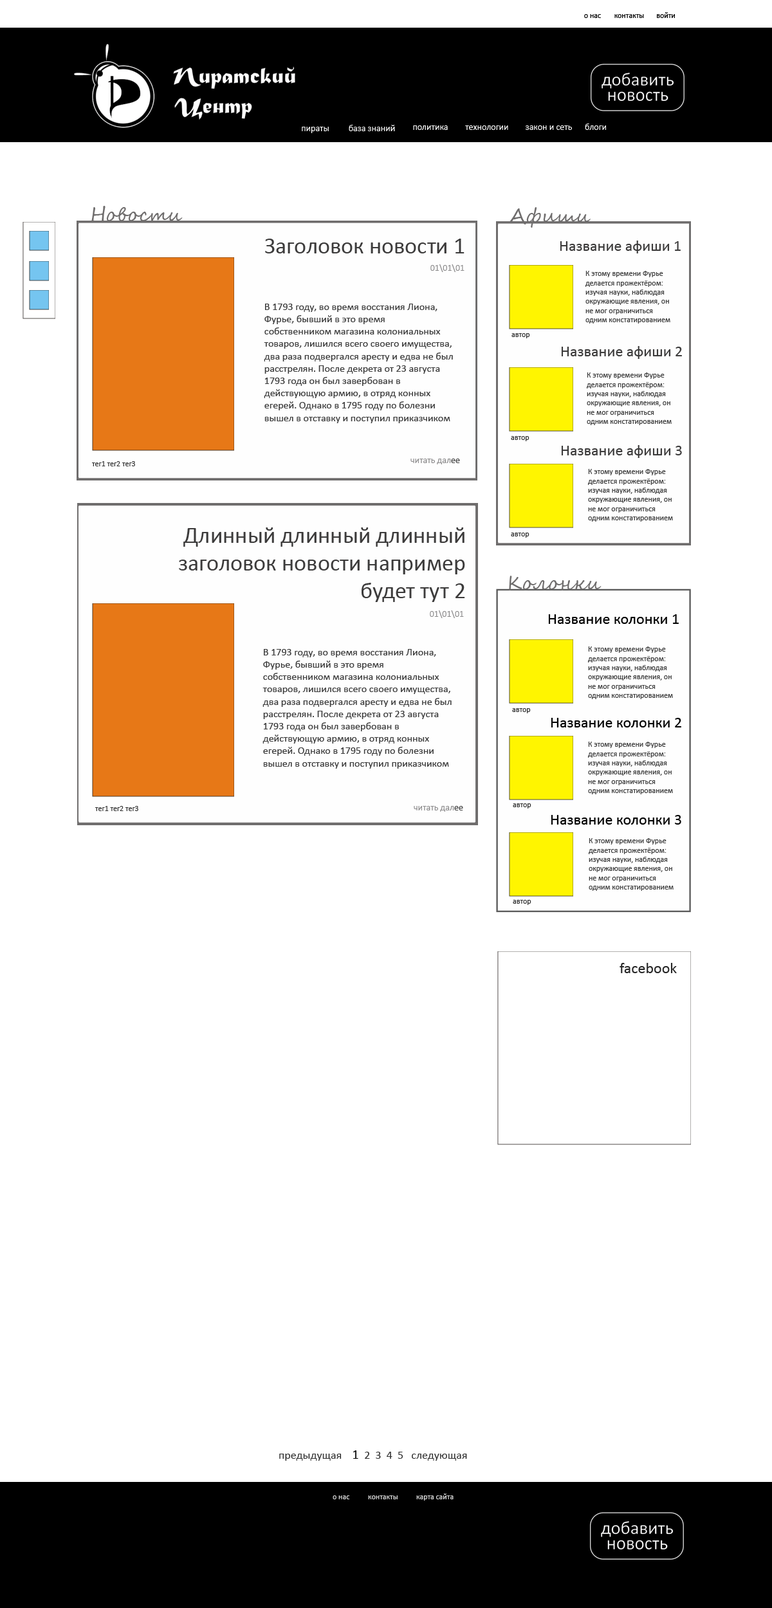
<style>
.page{position:relative;width:772px;height:1608px;background:#ffffff}
.page>*{position:absolute;margin:0}
.t1{font:7.7px "Calibri";color:#000000}
.t2{font:9px "Calibri";color:#ffffff}
.t3{font:19.3px "SegoeScript";color:#6f6d6d}
.t4{font:23.1px "Calibri";color:#3c3b3b}
.t5{font:15.4px "Calibri";color:#3c3b3b}
.t6{font:9px "Calibri";color:#8c8b8c}
.t7{font:7.7px "Calibri";color:#3d3d3d}
.t8{font:7.7px "Calibri";color:#3c3b3b}
.t9{font:10.3px "Calibri";color:#3d3d3d}
.t10{font:7.7px "Calibri";color:#323232}
.t11{font:9px "Calibri";color:#3d3d3d}
.t12{font:15.4px "Calibri";color:#000000}
.t13{font:15.4px "Calibri";color:#272727}
.t14{font:11.6px "Calibri";color:#323232}
.t15{font:12.9px "Calibri";color:#000000}
.t16{font:7.7px "Calibri";color:#dedede}
</style>
<div class="page">
<p class="t1" style="left:584px;top:14px;width:17px;height:4px">о нас</p>
<p class="t1" style="left:614px;top:14px;width:30px;height:4px">контакты</p>
<p class="t1" style="left:657px;top:12px;width:18px;height:6px">войти</p>
<p class="t2" style="left:349px;top:125px;width:46px;height:6px">база знаний</p>
<p class="t2" style="left:413px;top:125px;width:35px;height:5px">политика</p>
<p class="t2" style="left:465px;top:125px;width:43px;height:5px">технологии</p>
<p class="t2" style="left:525px;top:125px;width:47px;height:5px">закон и сеть</p>
<p class="t2" style="left:584px;top:123px;width:22px;height:7px">блоги</p>
<p class="t2" style="left:302px;top:127px;width:27px;height:6px">пираты</p>
<p class="t3" style="left:91px;top:206px;width:92px;height:16px">Новости</p>
<p class="t3" style="left:509px;top:207px;width:81px;height:21px">Афиши</p>
<p class="t4" style="left:265px;top:239px;width:199px;height:14px">Заголовок новости 1</p>
<p class="t5" style="left:559px;top:240px;width:121px;height:13px">Название афиши 1</p>
<p class="t6" style="left:430px;top:264px;width:34px;height:8px">01\01\01</p>
<p class="t7" style="left:585px;top:271px;width:85px;height:52px">К этому времени Фурье делается прожектёром: изучая науки, наблюдая окружающие явления, он не мог ограничиться одним констатированием<span class="t8"> встречавшихся несовершенств или даже только критикой их</span></p>
<p class="t9" style="left:264px;top:303px;width:189px;height:120px">В 1793 году, во время восстания Лиона, Фурье, бывший в это время собственником магазина колониальных товаров, лишился всего своего имущества, два раза подвергался аресту и едва не был расстрелян. После декрета от 23 августа 1793 года он был завербован в действующую армию, в отряд конных егерей. Однако в 1795 году по болезни вышел в отставку и поступил приказчиком к хлебному торговцу в Марселе, а затем был биржевым маклером без законного свидетельства в Лионе.</p>
<p class="t10" style="left:511px;top:333px;width:19px;height:5px">автор</p>
<p class="t5" style="left:561px;top:346px;width:121px;height:13px">Название афиши 2</p>
<p class="t7" style="left:586px;top:372px;width:85px;height:53px">К этому времени Фурье делается прожектёром: изучая науки, наблюдая окружающие явления, он не мог ограничиться одним констатированием <span class="t8">встречавшихся несовершенств или даже только критикой их</span></p>
<p class="t10" style="left:511px;top:436px;width:18px;height:5px">автор</p>
<p class="t5" style="left:561px;top:445px;width:121px;height:13px">Название афиши 3</p>
<p class="t10" style="left:92px;top:461px;width:43px;height:5px">тег1 тег2 тег3</p>
<p class="t6" style="left:410px;top:458px;width:50px;height:6px">читать дал<span class="t11">ее</span></p>
<p class="t7" style="left:588px;top:469px;width:85px;height:52px">К этому времени Фурье делается прожектёром: изучая науки, наблюдая окружающие явления, он не мог ограничиться одним констатированием<span class="t8"> встречавшихся несовершенств или даже только критикой их</span></p>
<p class="t4" style="left:179px;top:527px;width:286px;height:75px;text-align:right">Длинный длинный длинный<br>заголовок новости например<br>будет тут 2</p>
<p class="t10" style="left:511px;top:532px;width:18px;height:6px">автор</p>
<p class="t3" style="left:509px;top:575px;width:92px;height:15px">Колонки</p>
<p class="t12" style="left:548px;top:614px;width:130px;height:10px">Название колонки 1</p>
<p class="t9" style="left:262px;top:649px;width:189px;height:119px">В 1793 году, во время восстания Лиона, Фурье, бывший в это время собственником магазина колониальных товаров, лишился всего своего имущества, два раза подвергался аресту и едва не был расстрелян. После декрета от 23 августа 1793 года он был завербован в действующую армию, в отряд конных егерей. Однако в 1795 году по болезни вышел в отставку и поступил приказчиком к хлебному торговцу в Марселе, а затем был биржевым маклером без законного свидетельства в Лионе.</p>
<p class="t7" style="left:588px;top:646px;width:85px;height:53px">К этому времени Фурье делается прожектёром: изучая науки, наблюдая окружающие явления, он не мог ограничиться одним констатированием<span class="t8"> встречавшихся несовершенств или даже только критикой их</span></p>
<p class="t10" style="left:512px;top:708px;width:18px;height:5px">автор</p>
<p class="t12" style="left:550px;top:718px;width:131px;height:9px">Название колонки 2</p>
<p class="t7" style="left:588px;top:741px;width:85px;height:53px">К этому времени Фурье делается прожектёром: изучая науки, наблюдая окружающие явления, он не мог ограничиться одним констатированием<span class="t8"> встречавшихся несовершенств или даже только критикой их</span></p>
<p class="t10" style="left:95px;top:806px;width:43px;height:5px">тег1 тег2 тег3</p>
<p class="t6" style="left:413px;top:806px;width:50px;height:5px">читать дал<span class="t11">ее</span></p>
<p class="t10" style="left:512px;top:803px;width:19px;height:5px">автор</p>
<p class="t12" style="left:550px;top:815px;width:131px;height:9px">Название колонки 3</p>
<p class="t7" style="left:588px;top:838px;width:85px;height:53px">К этому времени Фурье делается прожектёром: изучая науки, наблюдая окружающие явления, он не мог ограничиться одним констатированием<span class="t8"> встречавшихся несовершенств или даже только критикой их</span></p>
<p class="t10" style="left:512px;top:900px;width:19px;height:5px">автор</p>
<p class="t13" style="left:619px;top:963px;width:57px;height:10px">facebook</p>
<p class="t14" style="left:279px;top:1450px;width:188px;height:10px">предыдущая    <span class="t15">1 </span> 2  3  4  5   следующая</p>
<p class="t16" style="left:416px;top:1493px;width:37px;height:7px">карта сайта</p>
<p class="t16" style="left:332px;top:1495px;width:18px;height:4px">о нас</p>
<p class="t16" style="left:368px;top:1495px;width:29px;height:4px">контакты</p>
</div>
